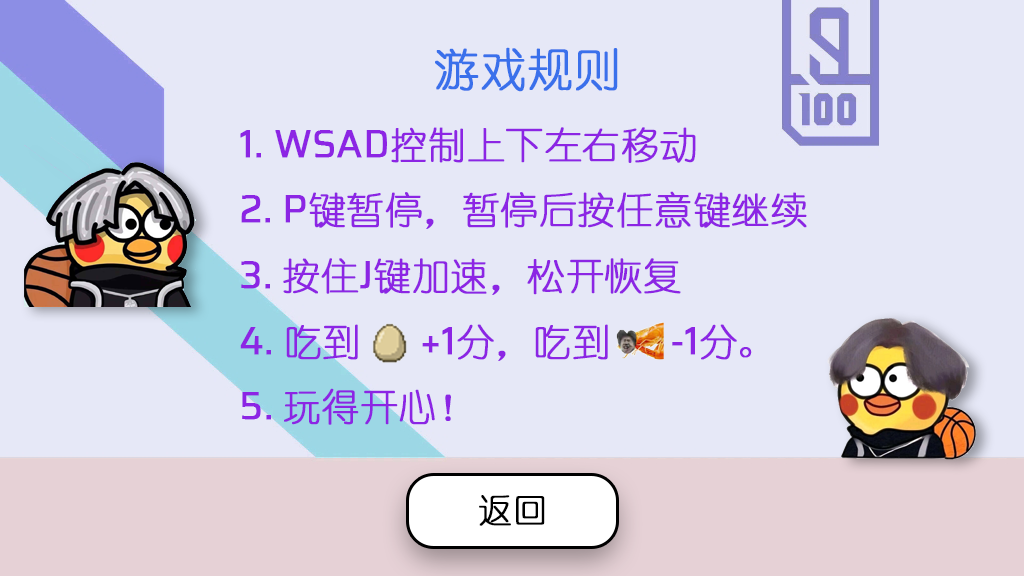
<style>
.page{position:relative;width:1024px;height:576px;background:#e6e8f7}
.page>*{position:absolute;margin:0}
.t1{font:37.5px "YouYuan";color:#8c25e4;font-weight:bold}
.t2{font:45.8px "YouYuan";color:#3a70eb;font-weight:bold}
.t3{font:37.5px "Saira-Regular";color:#8c25e4;font-weight:bold}
.t4{font:33.3px "YouYuan";color:#000000;font-weight:bold}
</style>
<div class="page">
<p class="t1" style="left:240px;top:47px;width:567px;height:378px"><span class="t2">        游戏规则<br></span><span class="t3">1. WSAD</span>控制上下左右移动<br><span class="t3">2. P</span>键暂停，暂停后按任意键继续<br><span class="t3">3. </span>按住<span class="t3">J</span>键加速，松开恢复<br><span class="t3">4. </span>吃到   <span class="t3">+1</span>分，吃到   <span class="t3">-1</span>分。<br><span class="t3">5. </span>玩得开心！</p>
<p class="t4" style="left:479px;top:495px;width:66px;height:31px">返回</p>
</div>
